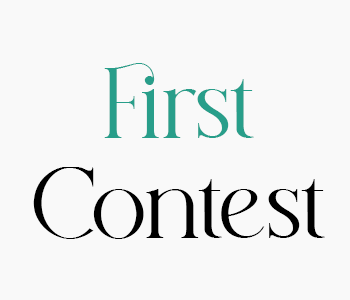
<style>
.page{position:relative;width:350px;height:300px;background:#f9f9f9}
.page>*{position:absolute;margin:0}
.t1{font:100px/100px "histeagin-Regular";color:#000000}
.t2{font:100px/100px "histeagin-Regular";color:#289e8a}
</style>
<div class="page">
<p class="t1" style="left:33px;top:63px;width:292px;height:176px;text-align:center"><span class="t2">First<br></span>Contest</p>
</div>
